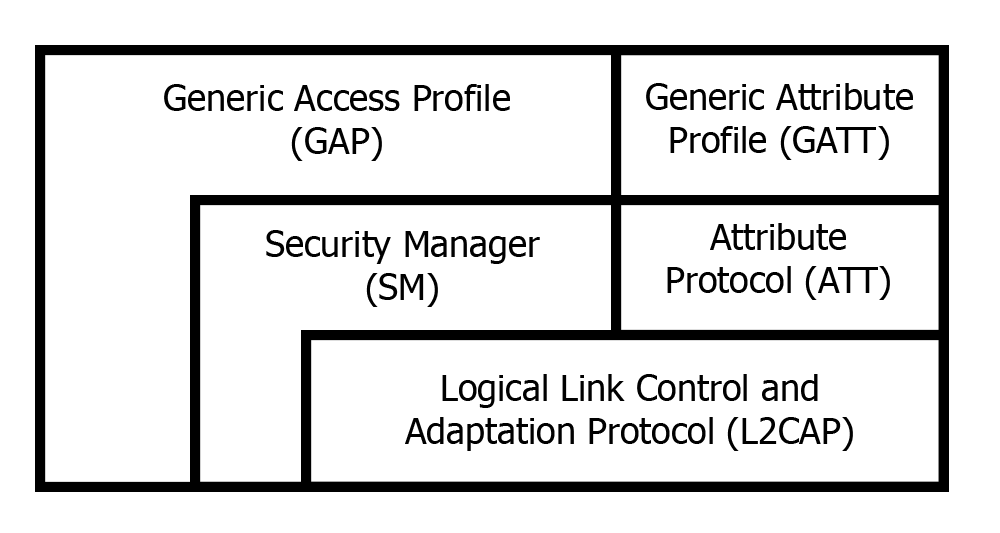
<style>
.page{position:relative;width:1000px;height:533px;background:#ffffff}
.page>*{position:absolute;margin:0}
.t1{font:36px "Tahoma";color:#000000}
</style>
<div class="page">
<p class="t1" style="left:164px;top:84px;width:346px;height:77px;text-align:center">Generic Access Profile<br>(GAP)</p>
<p class="t1" style="left:646px;top:83px;width:267px;height:77px;text-align:center">Generic Attribute<br>Profile (GATT)</p>
<p class="t1" style="left:266px;top:230px;width:274px;height:77px;text-align:center">Security Manager<br>(SM)</p>
<p class="t1" style="left:667px;top:223px;width:223px;height:77px;text-align:center">Attribute<br>Protocol (ATT)</p>
<p class="t1" style="left:405px;top:374px;width:448px;height:77px;text-align:center">Logical Link Control and<br>Adaptation Protocol (L2CAP)</p>
</div>
